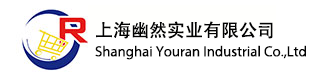
<style>
.page{position:relative;width:312px;height:76px;background:#ffffff}
.page>*{position:absolute;margin:0}
.t1{font:18.1px "AdobeHeitiStd-Regular";color:#020202}
.t2{font:14.7px "MyriadPro-Regular";color:#020202}
</style>
<div class="page">
<p class="t1" style="left:96px;top:21px;width:177px;height:18px">上海幽然实业有限公司</p>
<p class="t2" style="left:95px;top:45px;width:211px;height:15px">Shanghai Youran Industrial Co.,Ltd</p>
</div>
